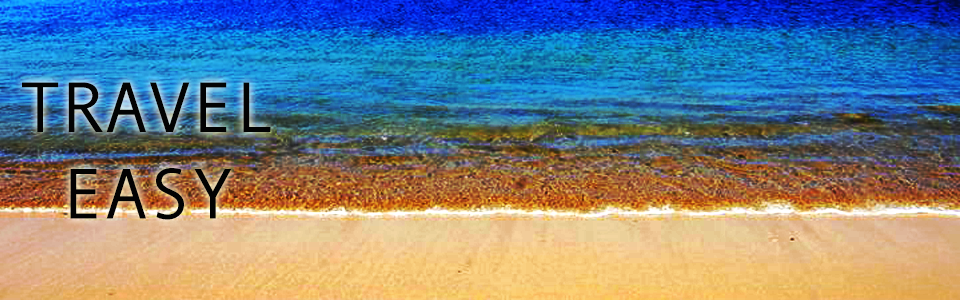
<style>
.page{position:relative;width:960px;height:300px}
.page>*{position:absolute;margin:0}
.t1{font:72px "AndaleMono";color:#030303}
</style>
<div class="page">
<p class="t1" style="left:22px;top:82px;width:249px;height:138px;text-align:center">TRAVEL<br>EASY</p>
</div>
